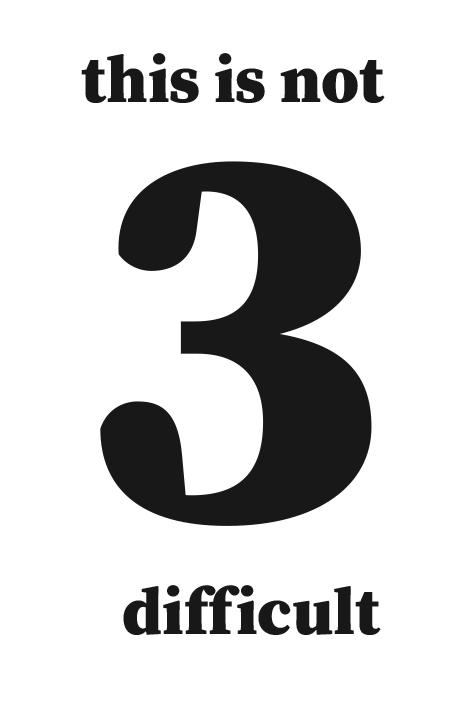
<style>
.page{position:relative;width:464px;height:716px;background:#ffffff}
.page>*{position:absolute;margin:0}
.t1{font:66.7px "SourceSerifRoman-Black";color:#181818}
.t2{font:555.6px "SourceSerifRoman-Black";color:#181818}
</style>
<div class="page">
<p class="t1" style="left:81px;top:53px;width:304px;height:50px">this is not</p>
<p class="t2" style="left:100px;top:161px;width:272px;height:365px">3</p>
<p class="t1" style="left:123px;top:585px;width:258px;height:50px">difficult</p>
</div>
